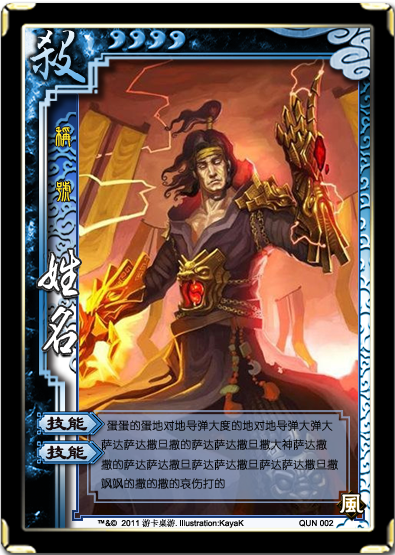
<style>
.page{position:relative;width:395px;height:555px}
.page>*{position:absolute;margin:0}
.t1{font:53.5px "ª÷±ö¤ò¯ó¦æÅé";letter-spacing:-0.02em;scale:1.15 1}
.t2{font:23.5px/7.7px "DFNewChuan-Md-HKP-BF";color:#ffe933}
.t3{font:46.5px "ª÷±ö¯ó¦æ®Ñ";letter-spacing:0.31em;color:#ffffff}
.t4{font:22px "FZLSFW--GB1-0";letter-spacing:-0.06em;color:#170b0c}
.t5{font:11px "YouYuan";color:#000000;font-weight:bold}
.t6{font:8.3px "ArialMT";color:#000000}
.t7{font:8.3px "SimSun";color:#000000}
</style>
<div class="page">
<p class="t1" style="left:30px;top:30px;width:56px;height:53px">殺</p>
<p class="t2" style="left:55px;top:126px;width:16px;height:76px">稱    號</p>
<p class="t3" style="left:38px;top:249px;width:42px;height:47px">姓</p>
<p class="t3" style="left:43px;top:306px;width:34px;height:47px">名</p>
<p class="t4" style="left:45px;top:416px;width:43px;height:15px">技能</p>
<p class="t5" style="left:101px;top:420px;width:237px;height:69px">蛋蛋的蛋地对地导弹大度的地对地导弹大弹大<br>萨达萨达撒旦撒的萨达萨达撒旦撒大神萨达撒<br>撒的萨达萨达撒旦萨达萨达撒旦萨达萨达撒旦撒<br>飒飒的撒的撒的哀伤打的</p>
<p class="t4" style="left:45px;top:445px;width:43px;height:15px">技能</p>
<p class="t6" style="left:97px;top:519px;width:147px;height:9px">™&amp;©  2011 <span class="t7">游卡桌游.</span>Illustration:KayaK</p>
<p class="t6" style="left:299px;top:519px;width:35px;height:8px">QUN 002</p>
</div>
